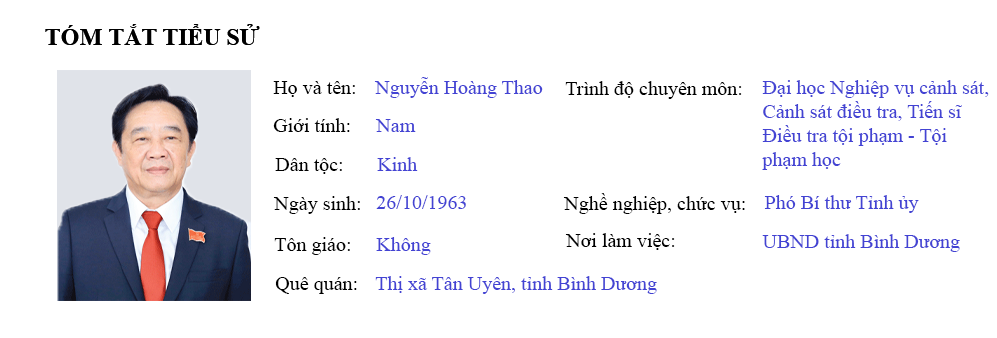
<style>
.page{position:relative;width:997px;height:338px;background:#ffffff}
.page>*{position:absolute;margin:0}
.t1{font:24px "TimesNewRomanPS-BoldMT";color:#000000}
.t2{font:20px "TimesNewRomanPSMT";color:#4343d4}
.t3{font:20px "TimesNewRomanPSMT";color:#000000}
.t4{font:20px/24px "TimesNewRomanPSMT";color:#4343d4}
</style>
<div class="page">
<p class="t1" style="left:45px;top:24px;width:215px;height:21px">TÓM TẮT TIỂU SỬ</p>
<p class="t2" style="left:374px;top:77px;width:169px;height:21px">Nguyễn Hoàng Thao</p>
<p class="t3" style="left:273px;top:81px;width:82px;height:16px">Họ và tên:</p>
<p class="t3" style="left:565px;top:81px;width:177px;height:18px">Trình độ chuyên môn:</p>
<p class="t4" style="left:762px;top:80px;width:227px;height:90px">Đại học Nghiệp vụ cảnh sát,<br>Cảnh sát điều tra, Tiến sĩ <br>Điều tra tội phạm - Tội <br>phạm học</p>
<p class="t3" style="left:273px;top:118px;width:77px;height:14px">Giới tính:</p>
<p class="t2" style="left:375px;top:119px;width:41px;height:13px">Nam</p>
<p class="t3" style="left:275px;top:158px;width:67px;height:16px">Dân tộc:</p>
<p class="t2" style="left:377px;top:157px;width:41px;height:14px">Kinh</p>
<p class="t3" style="left:273px;top:196px;width:87px;height:18px">Ngày sinh:</p>
<p class="t2" style="left:376px;top:195px;width:90px;height:14px">26/10/1963</p>
<p class="t3" style="left:563px;top:193px;width:182px;height:21px">Nghề nghiệp, chức vụ:</p>
<p class="t2" style="left:764px;top:195px;width:155px;height:18px">Phó Bí thư Tỉnh ủy</p>
<p class="t3" style="left:565px;top:233px;width:110px;height:17px">Nơi làm việc:</p>
<p class="t3" style="left:274px;top:237px;width:76px;height:18px">Tôn giáo:</p>
<p class="t2" style="left:376px;top:237px;width:55px;height:18px">Không</p>
<p class="t2" style="left:762px;top:234px;width:198px;height:18px">UBND tỉnh Bình Dương</p>
<p class="t3" style="left:275px;top:277px;width:82px;height:17px">Quê quán:</p>
<p class="t2" style="left:375px;top:276px;width:282px;height:18px">Thị xã Tân Uyên, tỉnh Bình Dương</p>
</div>
